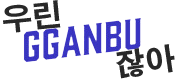
<style>
.page{position:relative;width:180px;height:80px;background:#ffffff}
.page>*{position:absolute;margin:0}
.t1{font:30px "AdobeGothicStd-Bold";color:#282828}
</style>
<div class="page">
<p class="t1" style="left:3px;top:0px;width:58px;height:33px;rotate:-5deg">우린</p>
<p class="t1" style="left:116px;top:44px;width:59px;height:35px;rotate:-8deg">잖아</p>
</div>
